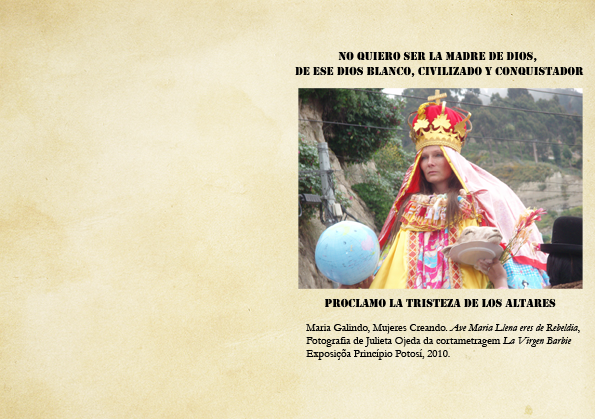
<style>
.page{position:relative;width:595px;height:419px}
.page>*{position:absolute;margin:0}
.t1{font:12px "Stencil";color:#000000}
.t2{font:11px "Garamond";color:#000000}
.t3{font:11px "Garamond-Italic";color:#000000}
</style>
<div class="page">
<p class="t1" style="left:295px;top:51px;width:289px;height:26px;text-align:center">no quiero ser la madre de dios, <br>de ese dios blanco, civilizado Y conquistador</p>
<p class="t1" style="left:325px;top:298px;width:231px;height:10px">proclamo la tristeza de los altares</p>
<p class="t2" style="left:306px;top:324px;width:274px;height:36px">Maria Galindo, Mujeres Creando. <span class="t3">Ave Maria Llena eres de Rebeldia</span>, <br>Fotografia de Julieta Ojeda da cortametragem <span class="t3">La Virgen Barbie<br></span>Exposiçõa Princípio Potosí, 2010.</p>
</div>
